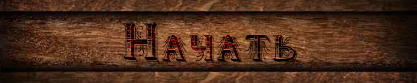
<style>
.page{position:relative;width:417px;height:83px}
.page>*{position:absolute;margin:0}
.t1{font:49.3px "WoodenShipDecorated"}
</style>
<div class="page">
<p class="t1" style="left:122px;top:22px;width:175px;height:41px">Начать</p>
</div>
